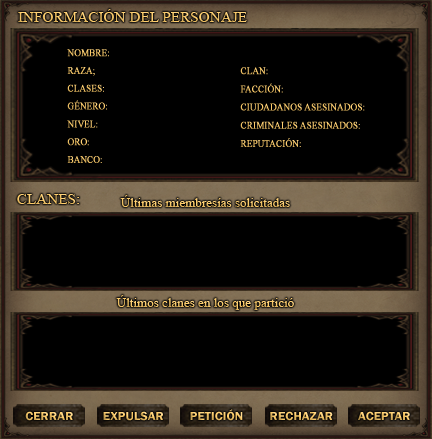
<style>
.page{position:relative;width:432px;height:439px;background:#000000}
.page>*{position:absolute;margin:0}
.t1{font:14px "TimesNewRomanPSMT";color:#fdcc6a;scale:1.09 1}
.t2{font:10px/17.8px "TimesNewRomanPSMT";color:#ffcf6d;text-transform:uppercase;font-weight:bold;scale:0.9 1}
.t3{font:10px/18.2px "TimesNewRomanPSMT";color:#fecd6b;text-transform:uppercase;font-weight:bold;scale:0.9 1}
.t4{font:12px "TimesNewRomanPSMT";scale:1.09 1}
.t5{font:12px "FranklinGothic-Demi";scale:1.07 1}
</style>
<div class="page">
<p class="t1" style="left:18px;top:9px;width:229px;height:13px">INFORMACIÓN DEL PERSONAJE</p>
<p class="t2" style="left:67px;top:49px;width:42px;height:114px">Nombre:<br>Raza;<br>Clases:<br>Género:<br>Nivel:<br>Oro:<br>Banco:</p>
<p class="t3" style="left:240px;top:67px;width:125px;height:80px">Clan:<br>Facción:<br>Ciudadanos asesinados:<br>Criminales asesinados:<br>Reputación:</p>
<p class="t1" style="left:17px;top:194px;width:62px;height:10px">CLANES:</p>
<p class="t4" style="left:120px;top:195px;width:170px;height:12px">Últimas miembresías solicitadas</p>
<p class="t4" style="left:116px;top:295px;width:178px;height:15px">Últimos clanes en los que partició</p>
<p class="t5" style="left:25px;top:411px;width:48px;height:10px">CERRAR</p>
<p class="t5" style="left:103px;top:411px;width:60px;height:10px">EXPULSAR</p>
<p class="t5" style="left:190px;top:409px;width:53px;height:12px">PETICIÓN</p>
<p class="t5" style="left:270px;top:411px;width:63px;height:10px">RECHAZAR</p>
<p class="t5" style="left:358px;top:411px;width:52px;height:10px">ACEPTAR</p>
</div>
